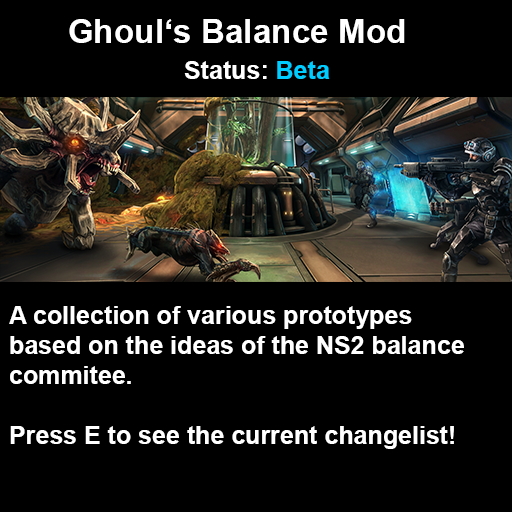
<style>
.page{position:relative;width:512px;height:512px;background:#000000}
.page>*{position:absolute;margin:0}
.t1{font:33.3px "Arial-BoldMT";color:#ffffff}
.t2{font:25px "Arial-BoldMT";color:#ffffff}
.t3{font:25px "Arial-BoldMT";color:#00ccff}
</style>
<div class="page">
<p class="t1" style="left:69px;top:19px;width:336px;height:24px">Ghoul‘s Balance Mod</p>
<p class="t2" style="left:184px;top:61px;width:146px;height:18px">Status: <span class="t3">Beta</span></p>
<p class="t2" style="left:9px;top:306px;width:455px;height:143px">A collection of various prototypes <br>based on the ideas of the NS2 balance<br>commitee.<br><br>Press E to see the current changelist!</p>
</div>
